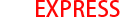
<style>
.page{position:relative;width:120px;height:17px;background:#ffffff}
.page>*{position:absolute;margin:0}
.t1{font:22px "AdobeHeitiStd-Regular";color:#fe0606}
</style>
<div class="page">
<p class="t1" style="left:36px;top:0px;width:84px;height:17px">EXPRESS</p>
</div>
